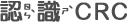
<style>
.page{position:relative;width:127px;height:22px;background:#ffffff}
.page>*{position:absolute;margin:0}
.t1{font:23.3px "DFYuanChuIn-Bd-BPMW-BF";letter-spacing:0.06em;color:#4c4c4c;font-weight:bold}
</style>
<div class="page">
<p class="t1" style="left:0px;top:0px;width:127px;height:22px">認識CRC</p>
</div>
